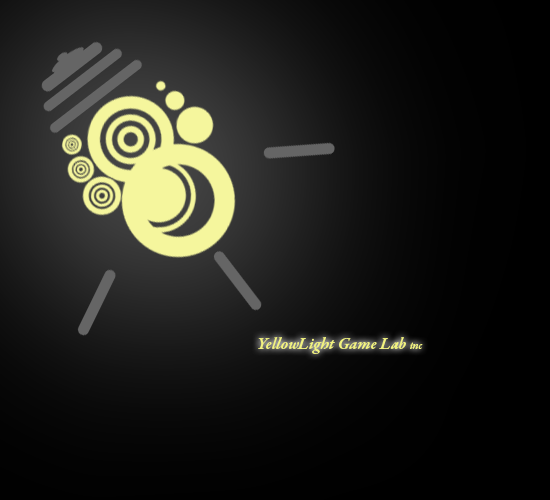
<style>
.page{position:relative;width:550px;height:500px}
.page>*{position:absolute;margin:0}
.t1{font:17px "GaramondPremrPro-SmbdIt";color:#f2f37f}
.t2{font:10px "GaramondPremrPro-SmbdIt";color:#f2f37f}
</style>
<div class="page">
<p class="t1" style="left:258px;top:337px;width:165px;height:17px">YellowLight Game Lab <span class="t2">inc</span></p>
</div>
